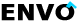
<style>
.page{position:relative;width:78px;height:22px;background:#ffffff}
.page>*{position:absolute;margin:0}
.t1{font:23.9px "MyriadPro-Bold";color:#000000;font-weight:bold;scale:1.18 1}
</style>
<div class="page">
<p class="t1" style="left:1px;top:4px;width:74px;height:17px">ENVO</p>
</div>
